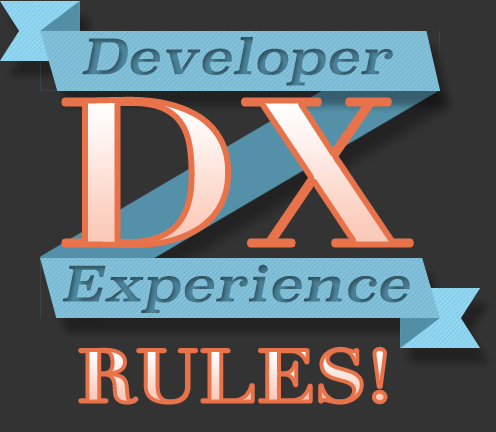
<style>
.page{position:relative;width:496px;height:432px;background:#333333}
.page>*{position:absolute;margin:0}
.t1{font:48px "Superclarendon-Italic";letter-spacing:0.015em;color:#416f82;scale:1.1 1}
.t2{font:202px "Didot-Bold";letter-spacing:0.015em;scale:1.1 1}
.t3{font:48px "Superclarendon-Italic";letter-spacing:0.015em;scale:1.1 1}
.t4{font:72px "Didot-Bold";letter-spacing:0.015em;scale:1.1 1}
</style>
<div class="page">
<p class="t1" style="left:82px;top:37px;width:311px;height:49px">Developer</p>
<p class="t2" style="left:64px;top:99px;width:347px;height:146px">DX</p>
<p class="t3" style="left:62px;top:264px;width:348px;height:49px">Experience</p>
<p class="t4" style="left:80px;top:348px;width:306px;height:55px">RULES!</p>
</div>
